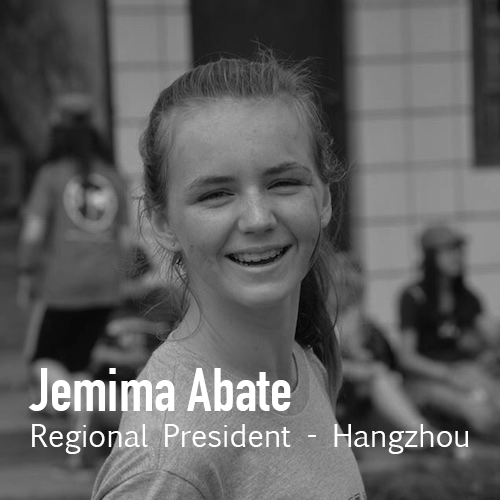
<style>
.page{position:relative;width:500px;height:500px}
.page>*{position:absolute;margin:0}
.t1{font:30px "EuphemiaUCAS";color:#ffffff}
.t2{font:60px "DINCondensed-Bold";color:#ffffff}
</style>
<div class="page">
<p class="t1" style="left:28px;top:368px;width:441px;height:86px"><span class="t2">Jemima Abate<br></span>Regional President - Hangzhou</p>
</div>
